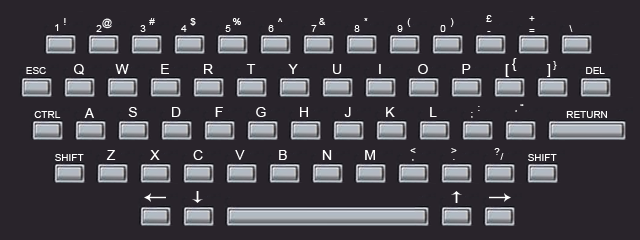
<style>
.page{position:relative;width:640px;height:240px;background:#29242b}
.page>*{position:absolute;margin:0}
.t1{font:10px "ArialMT";color:#ffffff}
.t2{font:10px "ArialMT"}
.t3{font:14px "ArialMT";color:#ffffff}
.t4{font:14px "ArialMT"}
</style>
<div class="page">
<p class="t1" style="left:486px;top:15px;width:6px;height:17px;text-align:center">£<br>-</p>
<p class="t1" style="left:529px;top:16px;width:6px;height:16px;text-align:center">+<br>=</p>
<p class="t1" style="left:55px;top:24px;width:4px;height:7px">1</p>
<p class="t2" style="left:64px;top:18px;width:2px;height:7px">!</p>
<p class="t1" style="left:96px;top:25px;width:6px;height:7px">2</p>
<p class="t1" style="left:102px;top:18px;width:10px;height:11px">@</p>
<p class="t1" style="left:140px;top:25px;width:6px;height:7px">3</p>
<p class="t1" style="left:149px;top:18px;width:6px;height:7px">#</p>
<p class="t1" style="left:181px;top:25px;width:6px;height:7px">4</p>
<p class="t1" style="left:190px;top:18px;width:6px;height:8px">$</p>
<p class="t1" style="left:225px;top:25px;width:6px;height:7px">5</p>
<p class="t1" style="left:232px;top:18px;width:9px;height:7px">%</p>
<p class="t1" style="left:268px;top:25px;width:6px;height:7px">6</p>
<p class="t1" style="left:278px;top:18px;width:5px;height:4px">^</p>
<p class="t1" style="left:311px;top:25px;width:6px;height:7px">7</p>
<p class="t1" style="left:319px;top:18px;width:7px;height:7px">&amp;</p>
<p class="t1" style="left:354px;top:25px;width:6px;height:7px">8</p>
<p class="t1" style="left:364px;top:18px;width:4px;height:3px">*</p>
<p class="t1" style="left:397px;top:25px;width:6px;height:7px">9</p>
<p class="t1" style="left:407px;top:18px;width:4px;height:9px">(</p>
<p class="t1" style="left:440px;top:25px;width:6px;height:7px">0</p>
<p class="t2" style="left:450px;top:18px;width:4px;height:9px">)</p>
<p class="t2" style="left:569px;top:25px;width:4px;height:7px">\</p>
<p class="t3" style="left:74px;top:64px;width:10px;height:11px">Q</p>
<p class="t3" style="left:115px;top:64px;width:14px;height:10px">W</p>
<p class="t3" style="left:161px;top:64px;width:8px;height:10px">E</p>
<p class="t3" style="left:204px;top:64px;width:9px;height:10px">R</p>
<p class="t3" style="left:246px;top:64px;width:10px;height:10px">T</p>
<p class="t3" style="left:288px;top:64px;width:10px;height:10px">Y</p>
<p class="t3" style="left:333px;top:64px;width:9px;height:10px">U</p>
<p class="t4" style="left:379px;top:64px;width:2px;height:10px">I</p>
<p class="t3" style="left:418px;top:64px;width:10px;height:10px">O</p>
<p class="t3" style="left:462px;top:64px;width:9px;height:10px">P</p>
<p class="t3" style="left:505px;top:64px;width:4px;height:13px">[</p>
<p class="t3" style="left:512px;top:58px;width:5px;height:13px">{</p>
<p class="t3" style="left:547px;top:64px;width:4px;height:13px">]</p>
<p class="t1" style="left:553px;top:61px;width:4px;height:9px">}</p>
<p class="t1" style="left:26px;top:67px;width:20px;height:7px">ESC</p>
<p class="t1" style="left:586px;top:67px;width:19px;height:7px">DEL</p>
<p class="t1" style="left:34px;top:111px;width:27px;height:7px">CTRL</p>
<p class="t3" style="left:84px;top:108px;width:10px;height:10px">A</p>
<p class="t3" style="left:128px;top:107px;width:9px;height:10px">S</p>
<p class="t3" style="left:172px;top:107px;width:9px;height:10px">D</p>
<p class="t3" style="left:215px;top:107px;width:8px;height:10px">F</p>
<p class="t3" style="left:256px;top:107px;width:10px;height:10px">G</p>
<p class="t3" style="left:300px;top:107px;width:8px;height:10px">H</p>
<p class="t3" style="left:344px;top:107px;width:7px;height:10px">J</p>
<p class="t3" style="left:386px;top:107px;width:9px;height:10px">K</p>
<p class="t3" style="left:430px;top:107px;width:7px;height:10px">L</p>
<p class="t2" style="left:471px;top:112px;width:2px;height:6px">;</p>
<p class="t2" style="left:478px;top:106px;width:2px;height:5px">:</p>
<p class="t2" style="left:515px;top:110px;width:2px;height:2px">‘</p>
<p class="t2" style="left:520px;top:104px;width:4px;height:2px">“</p>
<p class="t1" style="left:566px;top:111px;width:41px;height:7px">RETURN</p>
<p class="t3" style="left:106px;top:150px;width:10px;height:10px">Z</p>
<p class="t3" style="left:150px;top:150px;width:10px;height:10px">X</p>
<p class="t3" style="left:193px;top:150px;width:10px;height:10px">C</p>
<p class="t3" style="left:235px;top:150px;width:10px;height:10px">V</p>
<p class="t3" style="left:279px;top:150px;width:8px;height:10px">B</p>
<p class="t3" style="left:322px;top:150px;width:10px;height:10px">N</p>
<p class="t3" style="left:365px;top:150px;width:10px;height:10px">M</p>
<p class="t1" style="left:410px;top:148px;width:6px;height:5px">&lt;</p>
<p class="t1" style="left:451px;top:148px;width:6px;height:5px">&gt;</p>
<p class="t1" style="left:494px;top:148px;width:6px;height:7px">?</p>
<p class="t1" style="left:55px;top:154px;width:29px;height:7px">SHIFT</p>
<p class="t2" style="left:412px;top:159px;width:2px;height:2px">,</p>
<p class="t2" style="left:453px;top:159px;width:2px;height:1px">.</p>
<p class="t2" style="left:500px;top:153px;width:4px;height:7px">/</p>
<p class="t1" style="left:528px;top:154px;width:29px;height:7px">SHIFT</p>
</div>
